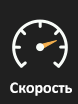
<style>
.page{position:relative;width:78px;height:104px;background:#202020}
.page>*{position:absolute;margin:0}
.t1{font:12px "Calibri-Bold";color:#ffffff}
</style>
<div class="page">
<p class="t1" style="left:10px;top:82px;width:62px;height:14px">Скорость</p>
</div>
